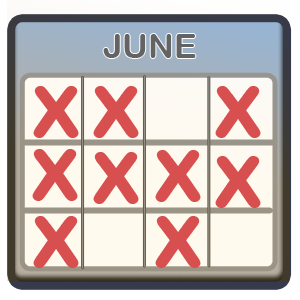
<style>
.page{position:relative;width:300px;height:300px}
.page>*{position:absolute;margin:0}
.t1{font:34px "ArialRoundedMTBold";color:#636363}
.t2{font:96px "ArialRoundedMTBold";color:#d74f4f}
</style>
<div class="page">
<p class="t1" style="left:103px;top:34px;width:93px;height:24px">JUNE</p>
<p class="t2" style="left:33px;top:86px;width:46px;height:52px">x</p>
<p class="t2" style="left:93px;top:86px;width:46px;height:52px">x</p>
<p class="t2" style="left:215px;top:86px;width:46px;height:52px">x</p>
<p class="t2" style="left:32px;top:149px;width:46px;height:52px">x</p>
<p class="t2" style="left:155px;top:150px;width:46px;height:52px">x</p>
<p class="t2" style="left:93px;top:152px;width:46px;height:52px">x</p>
<p class="t2" style="left:215px;top:156px;width:46px;height:52px">x</p>
<p class="t2" style="left:33px;top:216px;width:46px;height:52px">x</p>
<p class="t2" style="left:155px;top:216px;width:46px;height:52px">x</p>
</div>
